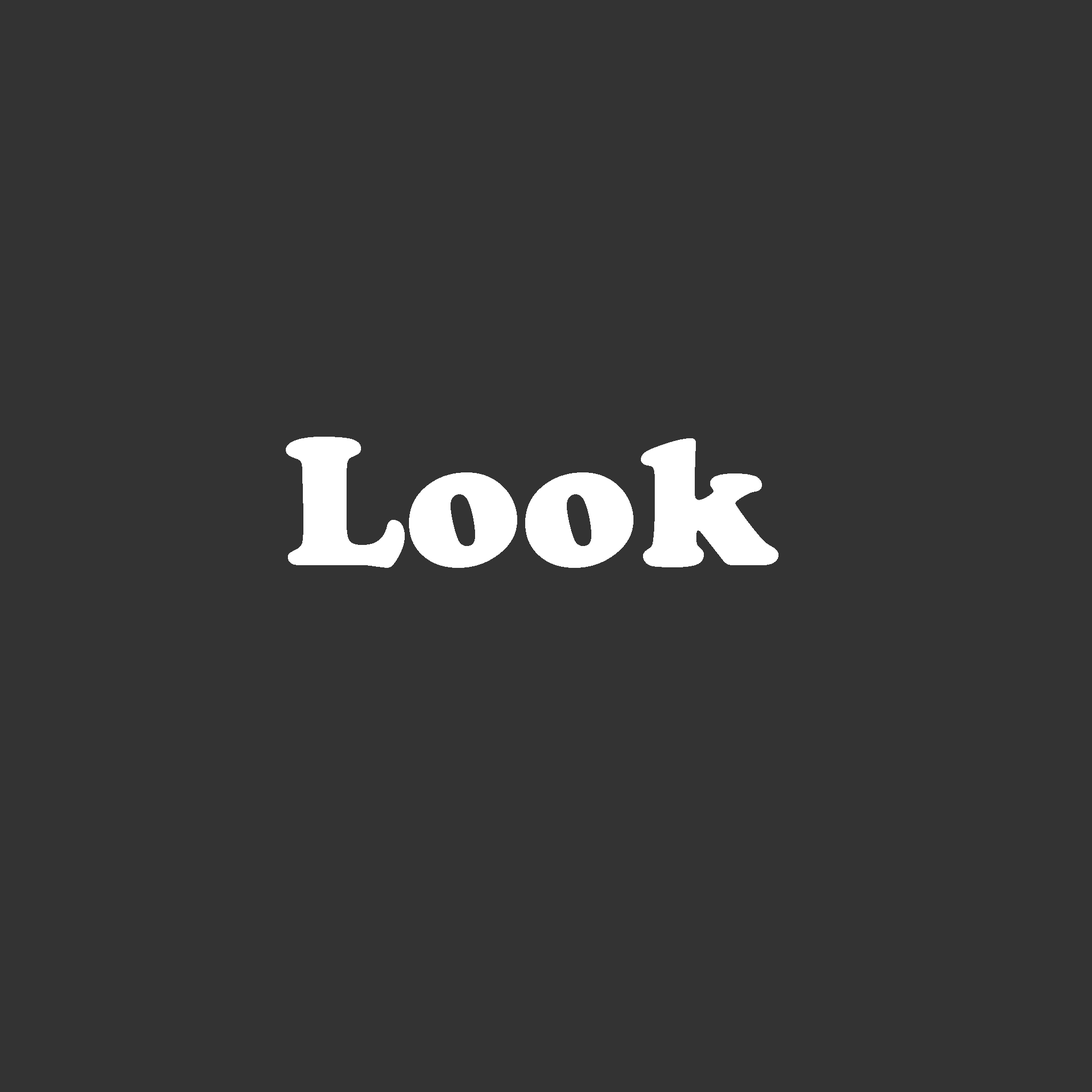
<style>
.page{position:relative;width:1092px;height:1092px;background:#333333}
.page>*{position:absolute;margin:0}
.t1{font:190.4px "CooperBlack";letter-spacing:0.01em;color:#ffffff}
</style>
<div class="page">
<p class="t1" style="left:286px;top:437px;width:492px;height:131px">Look</p>
</div>
